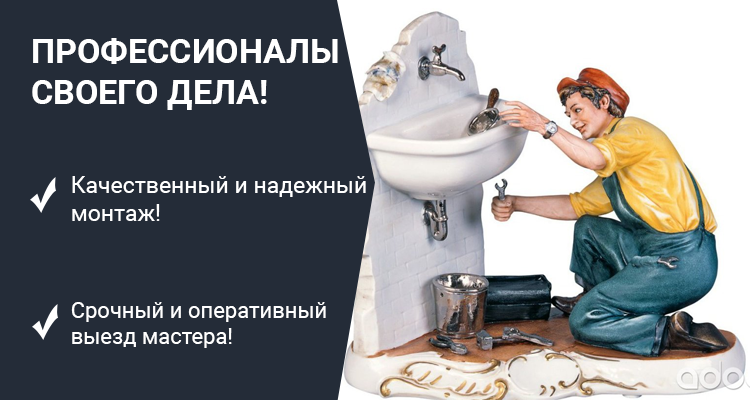
<style>
.page{position:relative;width:750px;height:400px;background:#242c38}
.page>*{position:absolute;margin:0}
.t1{font:34px "Roboto-Bold";color:#ffffff;text-transform:uppercase}
.t2{font:23px "Roboto-Regular";color:#ffffff}
.t3{font:22px "Roboto-Regular";color:#ffffff}
</style>
<div class="page">
<p class="t1" style="left:32px;top:38px;width:306px;height:72px">профессионалы <br>своего дела!</p>
<p class="t2" style="left:72px;top:176px;width:294px;height:45px">Качественный и надежный <br>монтаж!</p>
<p class="t3" style="left:71px;top:302px;width:255px;height:46px">Срочный и оперативный <br>выезд мастера!</p>
</div>
